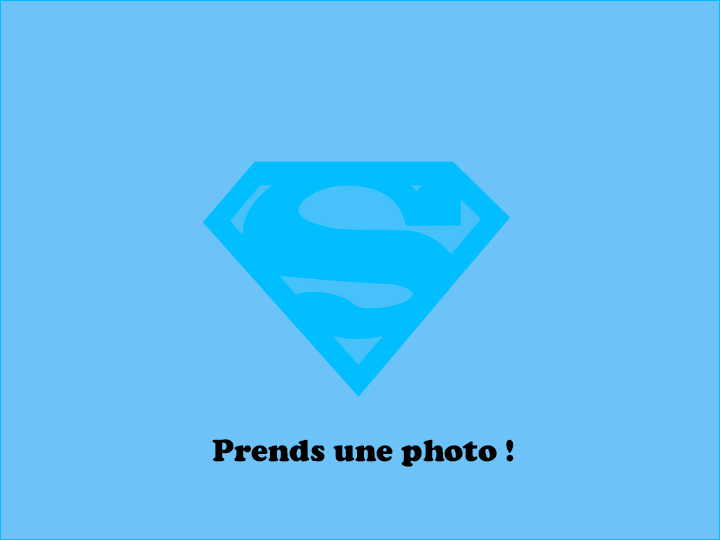
<style>
.page{position:relative;width:720px;height:540px;background:#6dc2f8}
.page>*{position:absolute;margin:0}
.t1{font:32px "CooperBlack";color:#000000}
</style>
<div class="page">
<p class="t1" style="left:212px;top:439px;width:302px;height:28px">Prends une photo !</p>
</div>
